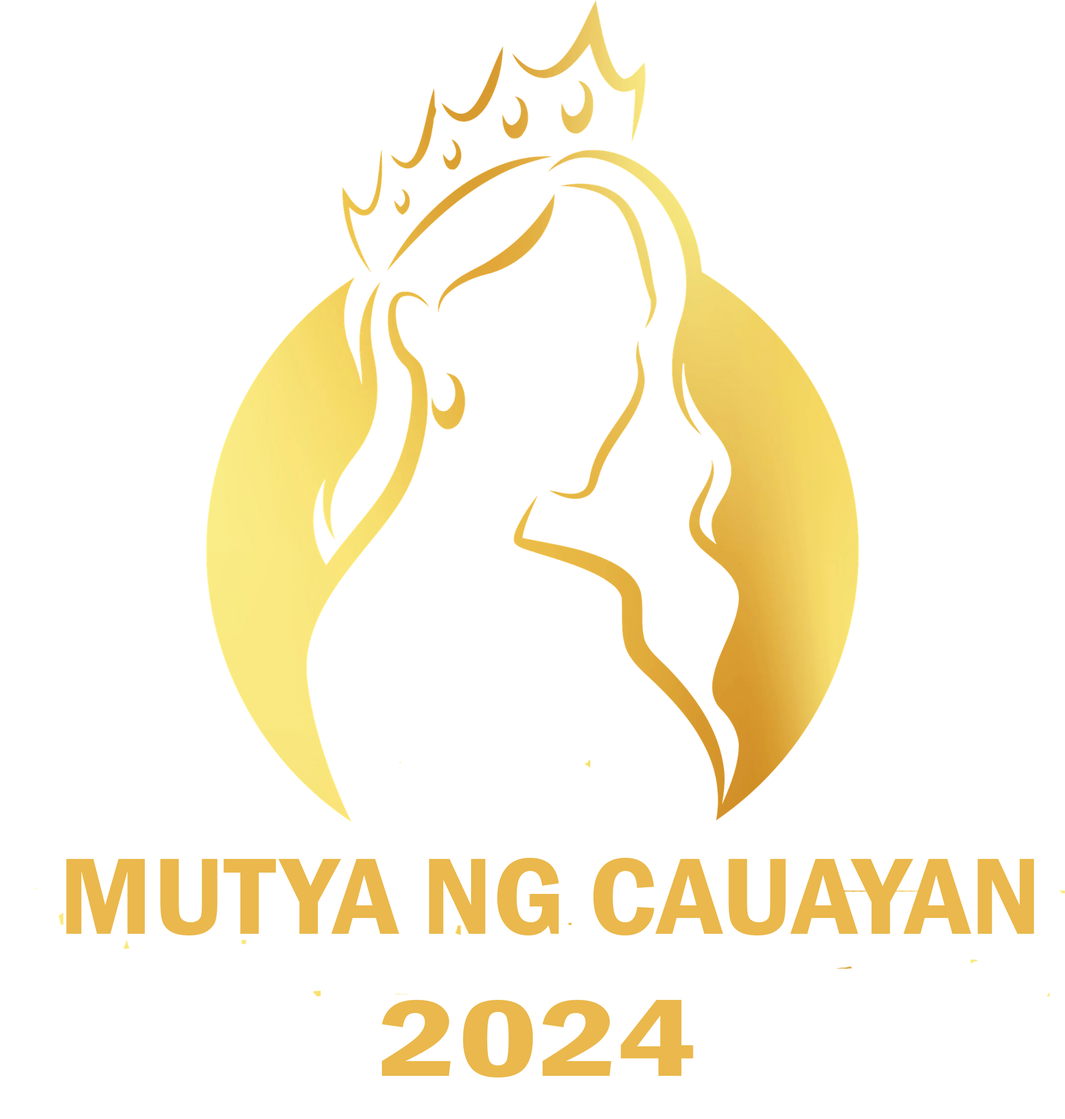
<style>
.page{position:relative;width:1065px;height:1119px;background:#ffffff}
.page>*{position:absolute;margin:0}
.t1{font:112.2px "FranklinGothic-DemiCond";color:#eab84c;scale:1.12 1}
.t2{font:112.2px "FranklinGothic-DemiCond";color:#eab84c;scale:1.4 1}
</style>
<div class="page">
<p class="t1" style="left:66px;top:858px;width:969px;height:78px">MUTYA NG CAUAYAN</p>
<p class="t2" style="left:382px;top:1000px;width:312px;height:78px">2024</p>
</div>
